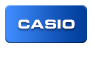
<style>
.page{position:relative;width:92px;height:64px;background:#ffffff}
.page>*{position:absolute;margin:0}
.t1{font:13.2px "EurostileExtended-Black";color:#ffffff}
</style>
<div class="page">
<p class="t1" style="left:18px;top:19px;width:57px;height:10px">CASIO</p>
</div>
